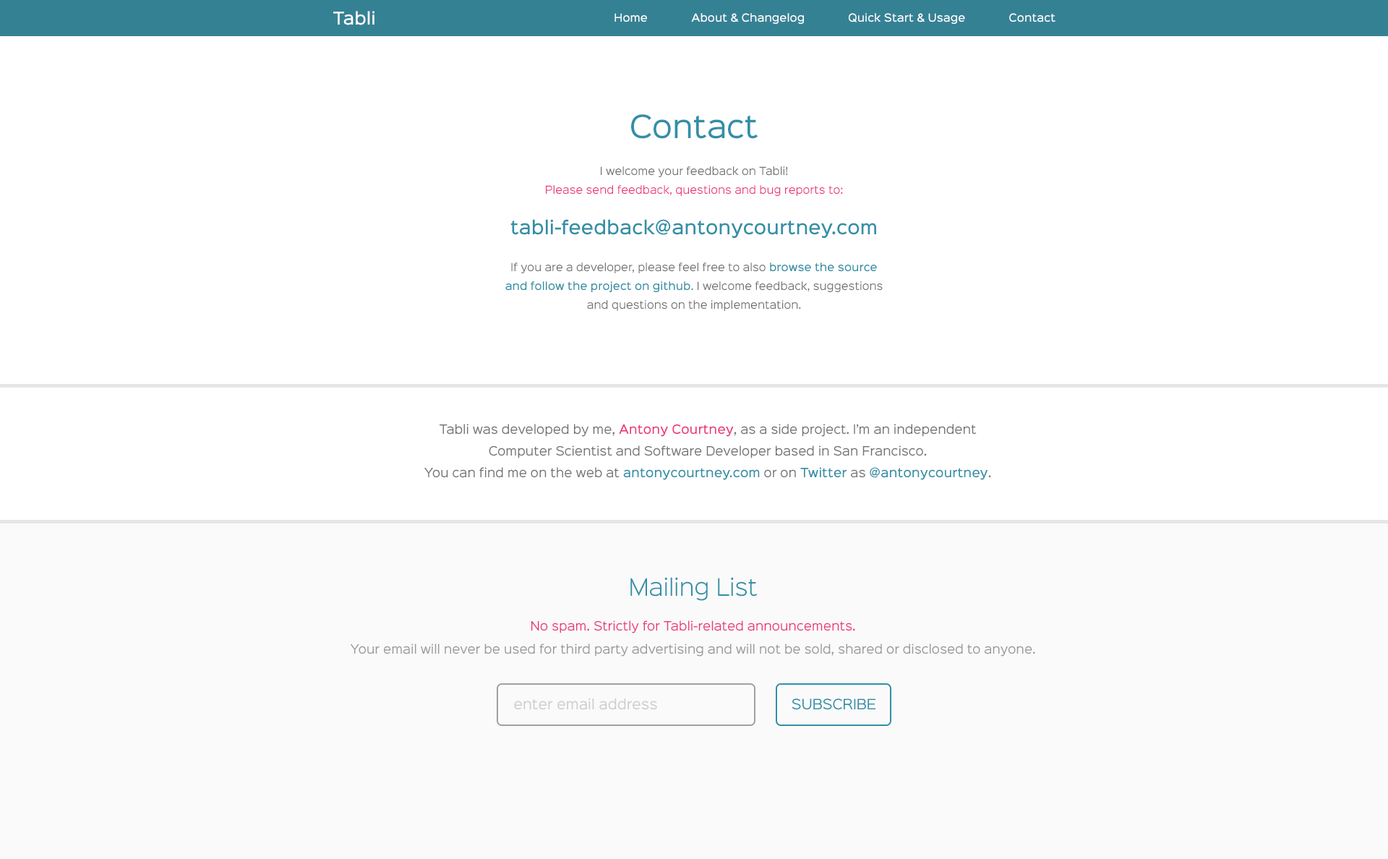
<style>
.page{position:relative;width:1388px;height:859px;background:#ffffff}
.page>*{position:absolute;margin:0}
.t1{font:15.9px "SinkinSans-500Medium";color:#ffffff}
.t2{font:10.1px "SinkinSans-500Medium";color:#ffffff}
.t3{font:10.1px/18.8px "SinkinSans-400Regular";color:#727272}
.t4{font:28.9px/33.3px "SinkinSans-400Regular";color:#328fa6}
.t5{font:10.1px/18.8px "SinkinSans-400Regular";color:#eb3979}
.t6{font:17.4px/18.8px "SinkinSans-500Medium";color:#328fa6}
.t7{font:10.1px/18.8px "SinkinSans-500Medium";color:#328fa6}
.t8{font:11.6px/21.7px "SinkinSans-400Regular";color:#727272}
.t9{font:11.6px/21.7px "SinkinSans-500Medium";color:#eb3979}
.t10{font:11.6px/21.7px "SinkinSans-500Medium";color:#328fa6}
.t11{font:21.7px "SinkinSans-300Light";color:#328fa6}
.t12{font:11.6px/23.1px "SinkinSans-400Regular";color:#999999}
.t13{font:11.6px/23.1px "SinkinSans-400Regular";color:#eb3979}
.t14{font:13px "SinkinSans-400Regular";color:#cdcdcd}
.t15{font:13px "SinkinSans-400Regular";color:#328fa6}
</style>
<div class="page">
<p class="t1" style="left:333px;top:11px;width:42px;height:14px">Tabli</p>
<p class="t2" style="left:615px;top:13px;width:441px;height:11px">Home              About &amp; Changelog              Quick Start &amp; Usage              Contact</p>
<p class="t3" style="left:505px;top:114px;width:378px;height:197px;text-align:center"><span class="t4">Contact<br></span>I welcome your feedback on Tabli!<br><span class="t5">Please send feedback, questions and bug reports to:<br></span><span class="t6">tabli-feedback@antonycourtney.com<br></span>If you are a developer, please feel free to also <span class="t7">browse the source and follow the project on github</span>. I welcome feedback, suggestions and questions on the implementation.</p>
<p class="t8" style="left:424px;top:424px;width:567px;height:56px;text-align:center">Tabli was developed by me, <span class="t9">Antony Courtney</span>, as a side project. I’m an independent Computer Scientist and Software Developer based in San Francisco.<br>You can find me on the web at <span class="t10">antonycourtney.com</span> or on <span class="t10">Twitter</span> as <span class="t10">@antonycourtney</span>.</p>
<p class="t11" style="left:630px;top:577px;width:128px;height:24px">Mailing List</p>
<p class="t12" style="left:350px;top:620px;width:685px;height:37px;text-align:center"><span class="t13">No spam. Strictly for Tabli-related announcements.<br></span>Your email will never be used for third party advertising and will not be sold, shared or disclosed to anyone.</p>
<p class="t14" style="left:514px;top:698px;width:143px;height:12px">enter email address</p>
<p class="t15" style="left:792px;top:698px;width:84px;height:12px">SUBSCRIBE</p>
</div>
